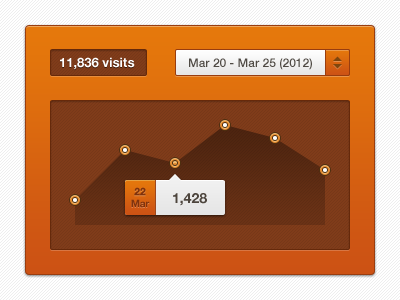
<style>
.page{position:relative;width:400px;height:300px}
.page>*{position:absolute;margin:0}
.t1{font:13px "HelveticaNeue-Bold";color:#ffffff}
.t2{font:12px "HelveticaNeue-Medium";color:#4f4a44}
.t3{font:10px "HelveticaNeue-Bold";color:#80330d}
.t4{font:10px "HelveticaNeue-Bold";color:#80330d;font-weight:bold}
.t5{font:14px "HelveticaNeue-Bold";color:#4d453d}
</style>
<div class="page">
<p class="t1" style="left:60px;top:57px;width:75px;height:13px">11,836 visits</p>
<p class="t2" style="left:189px;top:58px;width:123px;height:12px">Mar 20 - Mar 25 (2012)</p>
<p class="t3" style="left:131px;top:187px;width:19px;height:21px;text-align:center"><span class="t4">22<br></span>Mar</p>
<p class="t5" style="left:173px;top:193px;width:34px;height:13px">1,428</p>
</div>
